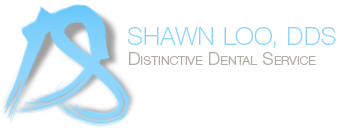
<style>
.page{position:relative;width:340px;height:128px;background:#ffffff}
.page>*{position:absolute;margin:0}
.t1{font:25px "HelveticaNeueLTStd-Th";letter-spacing:0.025em;color:#8dd5fc;text-transform:uppercase}
.t2{font:18px "HelveticaNeueLTStd-Lt";color:#b2aea6;font-variant:small-caps}
</style>
<div class="page">
<p class="t1" style="left:128px;top:27px;width:208px;height:22px">Shawn Loo, DDS</p>
<p class="t2" style="left:129px;top:52px;width:187px;height:13px">Distinctive Dental Service</p>
</div>
